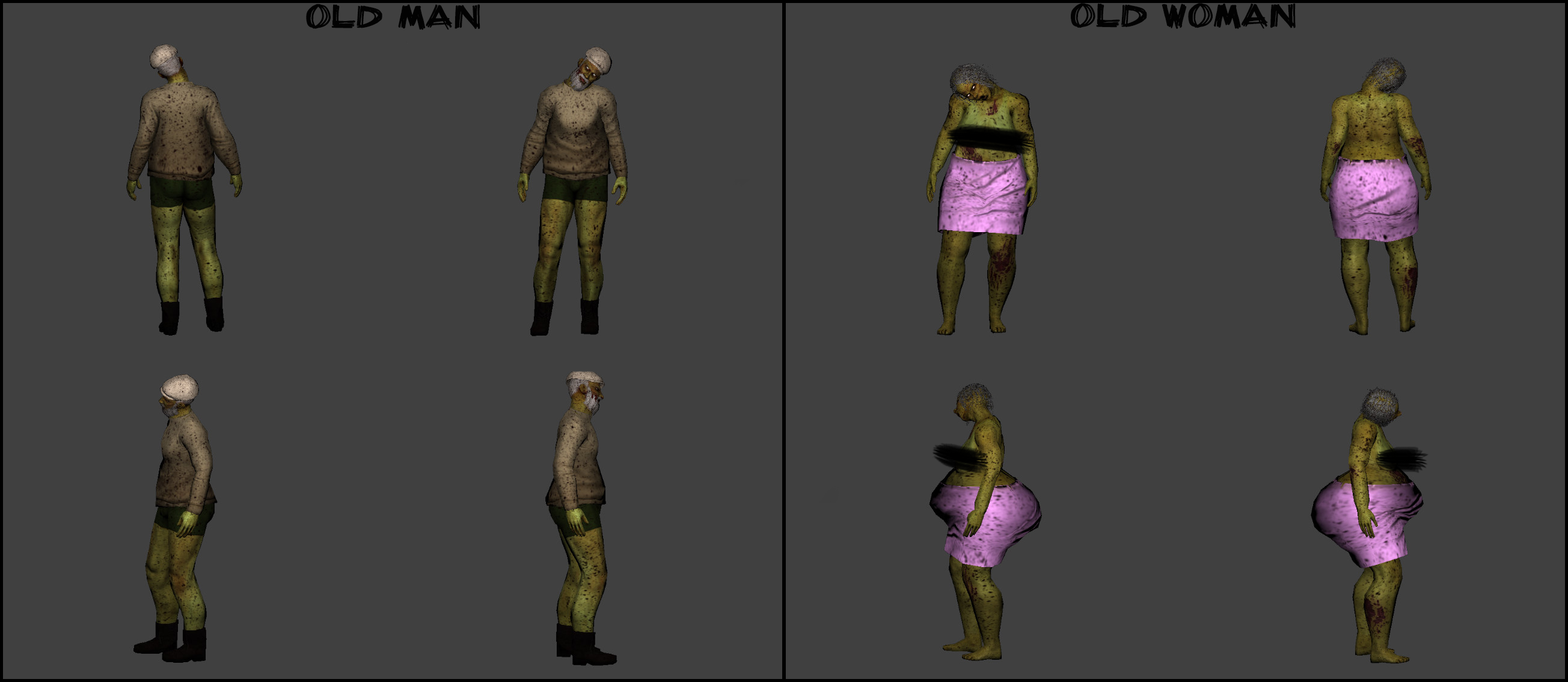
<style>
.page{position:relative;width:1568px;height:682px;background:#404040}
.page>*{position:absolute;margin:0}
.t1{font:28.3px "BillieBarred";color:#020202}
</style>
<div class="page">
<p class="t1" style="left:306px;top:4px;width:174px;height:26px">Old Man</p>
<p class="t1" style="left:1071px;top:3px;width:225px;height:26px">Old WOMan</p>
</div>
